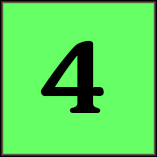
<style>
.page{position:relative;width:157px;height:157px;background:#66ff66}
.page>*{position:absolute;margin:0}
.t1{font:110px "ARJULIAN";color:#000000}
</style>
<div class="page">
<p class="t1" style="left:40px;top:40px;width:64px;height:73px">4</p>
</div>
